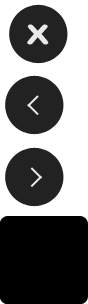
<style>
.page{position:relative;width:88px;height:304px;background:#ffffff}
.page>*{position:absolute;margin:0}
.t1{font:37.1px "ArialRoundedMTBold";color:#eaeaea;scale:1.21 1}
</style>
<div class="page">
<p class="t1" style="left:27px;top:24px;width:22px;height:21px">x</p>
</div>
